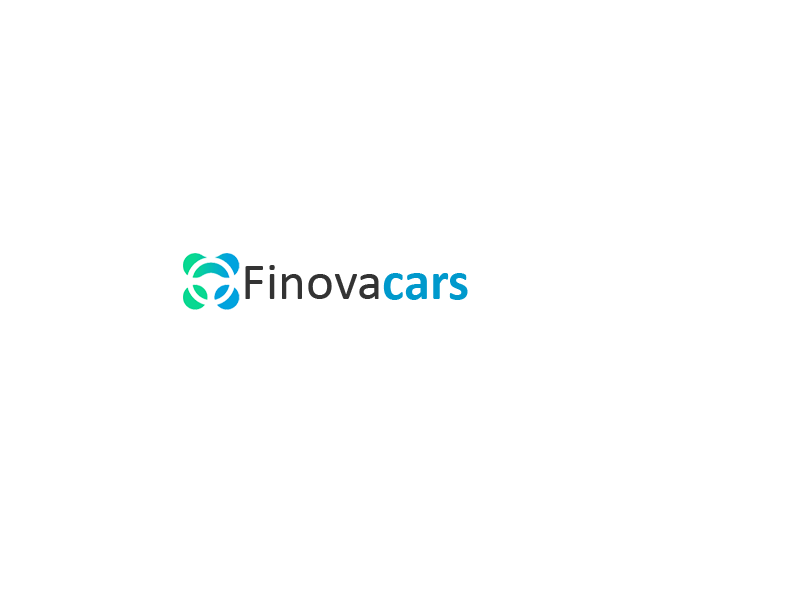
<style>
.page{position:relative;width:800px;height:600px;background:#ffffff}
.page>*{position:absolute;margin:0}
.t1{font:53px "Calibri";color:#333333}
.t2{font:53px "Calibri-Bold";color:#0099cc}
</style>
<div class="page">
<p class="t1" style="left:245px;top:265px;width:223px;height:35px">Finova<span class="t2">cars</span></p>
</div>
